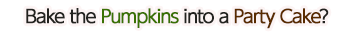
<style>
.page{position:relative;width:352px;height:33px;background:#ffffff}
.page>*{position:absolute;margin:0}
.t1{font:18px "UDShinGoPro-Regular";letter-spacing:-0.08em;color:#592b00;font-weight:bold}
.t2{font:18px "UDShinGoPro-Regular";letter-spacing:-0.08em;color:#232320;font-weight:bold}
.t3{font:18px "UDShinGoPro-Regular";letter-spacing:-0.08em;color:#3a7103;font-weight:bold}
</style>
<div class="page">
<p class="t1" style="left:26px;top:8px;width:303px;height:21px"><span class="t2">Bake the </span><span class="t3">Pumpkins</span><span class="t2"> into a </span>Party Cake<span class="t2">?</span></p>
</div>
